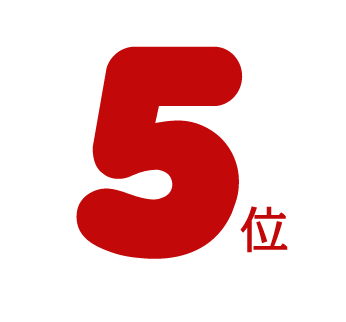
<style>
.page{position:relative;width:346px;height:322px;background:#ffffff}
.page>*{position:absolute;margin:0}
.t1{font:286.5px "AnjaElianeaccent-Nornal";color:#c20808;font-weight:bold}
.t2{font:50px "KakuminPro-Regular";color:#c20808;font-weight:bold}
</style>
<div class="page">
<p class="t1" style="left:76px;top:46px;width:167px;height:213px">5</p>
<p class="t2" style="left:240px;top:206px;width:48px;height:47px">位</p>
</div>
